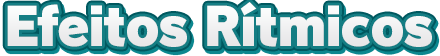
<style>
.page{position:relative;width:440px;height:56px}
.page>*{position:absolute;margin:0}
.t1{font:52px "RodinPro-UB";letter-spacing:-0.04em;color:#f0f0f1}
</style>
<div class="page">
<p class="t1" style="left:7px;top:2px;width:425px;height:45px">Efeitos Rítmicos</p>
</div>
